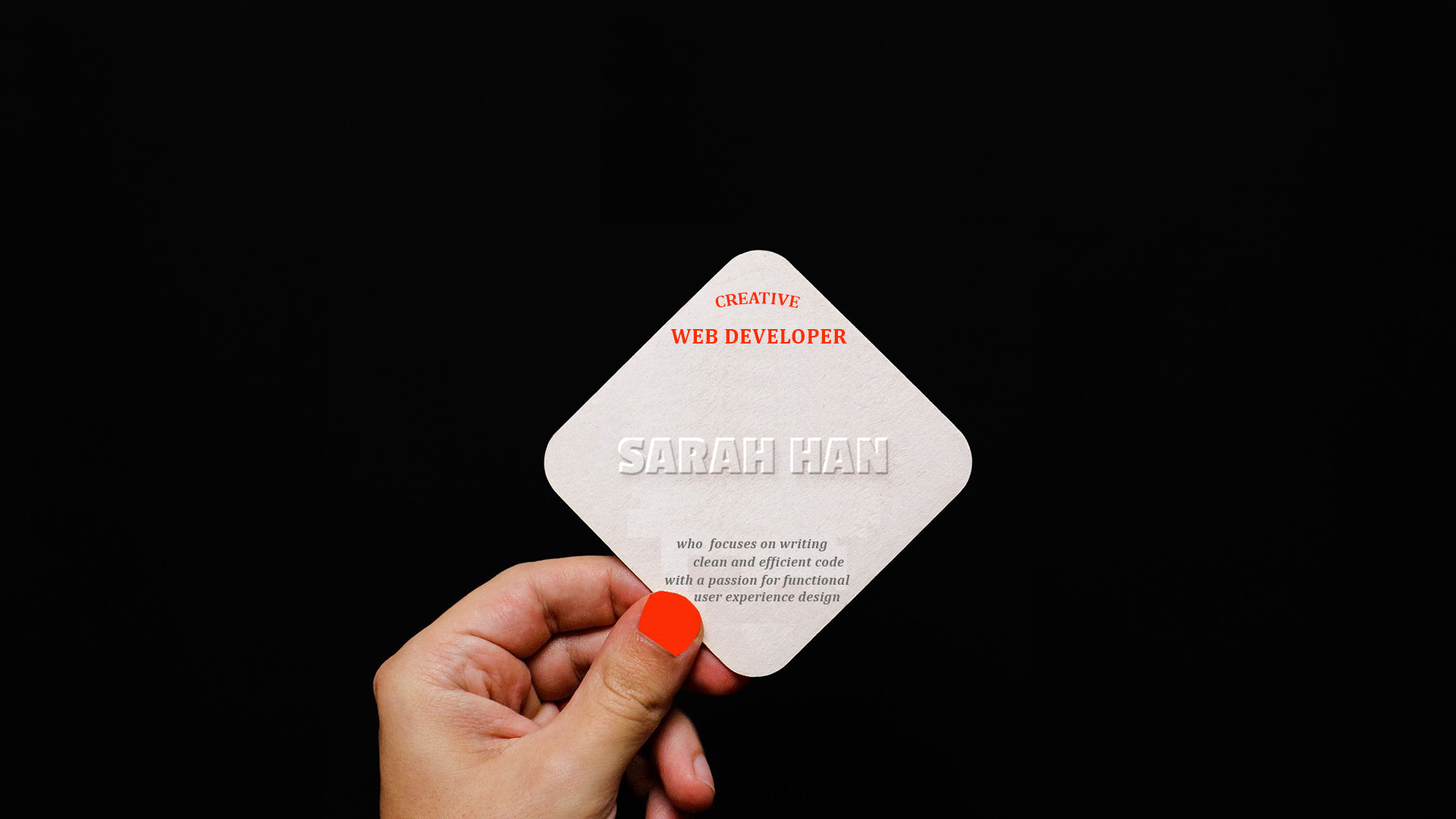
<style>
.page{position:relative;width:1456px;height:819px;background:#050505}
.page>*{position:absolute;margin:0}
.t1{font:16.7px "Cambria-Bold";letter-spacing:0.025em;color:#fc2c03}
.t2{font:21.2px "Cambria-Bold";letter-spacing:0.025em;color:#fc2c03}
.t3{font:13.6px/18.2px "Cambria-BoldItalic";letter-spacing:0.025em;color:#6a6968}
.t4{font:13.6px/16.7px "Cambria-BoldItalic";letter-spacing:0.025em;color:#6a6968}
</style>
<div class="page">
<p class="t1" style="left:715px;top:292px;width:86px;height:17px">CREATIVE</p>
<p class="t2" style="left:670px;top:329px;width:177px;height:15px">WEB DEVELOPER</p>
<p class="t3" style="left:665px;top:538px;width:185px;height:66px;text-align:center"><span class="t4">who  focuses on writing<br>          </span>clean and efficient code<br>   with a passion for functional<br><span class="t4">         user experience design</span></p>
</div>
